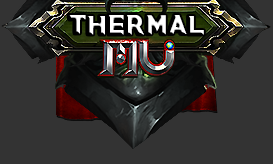
<style>
.page{position:relative;width:273px;height:164px;background:#333333}
.page>*{position:absolute;margin:0}
.t1{font:24px "PRIMETIME-Regular";font-weight:bold}
</style>
<div class="page">
<p class="t1" style="left:68px;top:15px;width:136px;height:20px">THERMAL</p>
</div>
